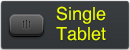
<style>
.page{position:relative;width:130px;height:50px}
.page>*{position:absolute;margin:0}
.t1{font:18px/20px "Helvetica";color:#eefd00}
</style>
<div class="page">
<p class="t1" style="left:56px;top:6px;width:50px;height:35px">Single<br>Tablet</p>
</div>
